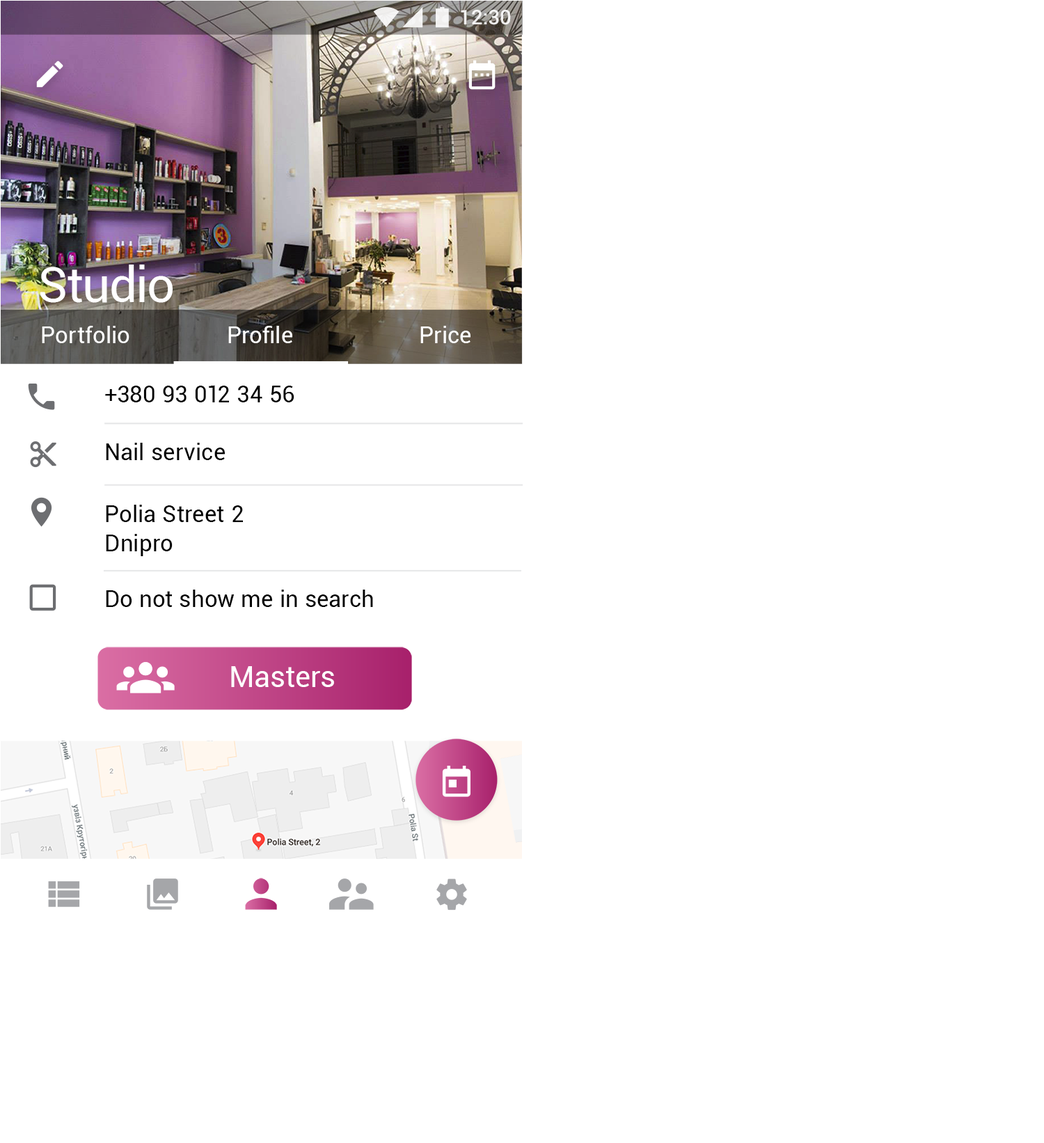
<style>
.page{position:relative;width:1044px;height:1143px;background:#ffffff}
.page>*{position:absolute;margin:0}
.t1{font:20.3px "Roboto-Medium";color:#ffffff}
.t2{font:49.4px "Roboto-Regular";letter-spacing:-0.005em;color:#ffffff}
.t3{font:23.2px "Roboto-Regular";letter-spacing:0.01em;color:#ffffff}
.t4{font:23.2px "Roboto-Regular";letter-spacing:0.01em;color:#000000}
.t5{font:23.2px/23.2px "Roboto-Regular";letter-spacing:0.01em;color:#000000}
.t6{font:23.2px/29px "Roboto-Regular";letter-spacing:0.01em;color:#000000}
.t7{font:29px "Roboto-Regular";color:#ffffff}
</style>
<div class="page">
<p class="t1" style="left:461px;top:10px;width:50px;height:15px">12:30</p>
<p class="t2" style="left:40px;top:264px;width:133px;height:39px">Studio</p>
<p class="t3" style="left:42px;top:326px;width:87px;height:17px">Portfolio</p>
<p class="t3" style="left:228px;top:326px;width:64px;height:17px">Profile</p>
<p class="t3" style="left:420px;top:326px;width:50px;height:17px">Price</p>
<p class="t4" style="left:105px;top:385px;width:189px;height:17px">+380 93 012 34 56</p>
<p class="t4" style="left:106px;top:443px;width:119px;height:17px">Nail service</p>
<p class="t5" style="left:106px;top:504px;width:137px;height:52px">Polia Street 2<br><span class="t6">Dnipro</span></p>
<p class="t4" style="left:106px;top:589px;width:267px;height:18px">Do not show me in search</p>
<p class="t7" style="left:231px;top:666px;width:103px;height:21px">Masters</p>
</div>
